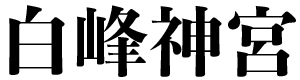
<style>
.page{position:relative;width:300px;height:80px;background:#ffffff}
.page>*{position:absolute;margin:0}
.t1{font:75.5px "YuMin-Extrabold";color:#000000}
</style>
<div class="page">
<p class="t1" style="left:9px;top:5px;width:287px;height:72px">白峰神宮</p>
</div>
